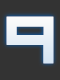
<style>
.page{position:relative;width:60px;height:80px;background:#333333}
.page>*{position:absolute;margin:0}
.t1{font:92px "VisitorTT1BRK";color:#fafafa;font-weight:bold}
</style>
<div class="page">
<p class="t1" style="left:6px;top:16px;width:48px;height:48px">9</p>
</div>
